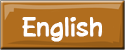
<style>
.page{position:relative;width:125px;height:50px;background:#b06d1e}
.page>*{position:absolute;margin:0}
.t1{font:24px "Chinacat";color:#ffffff;font-weight:bold}
</style>
<div class="page">
<p class="t1" style="left:22px;top:17px;width:80px;height:25px">English</p>
</div>
